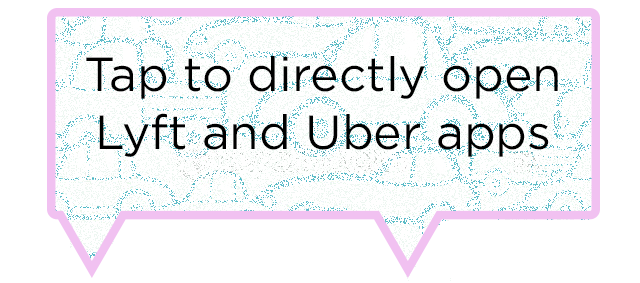
<style>
.page{position:relative;width:640px;height:283px;background:#ffffff}
.page>*{position:absolute;margin:0}
.t1{font:48px "Gotham-Book";color:#000000}
</style>
<div class="page">
<p class="t1" style="left:86px;top:56px;width:472px;height:101px;text-align:center">Tap to directly open Lyft and Uber apps</p>
</div>
